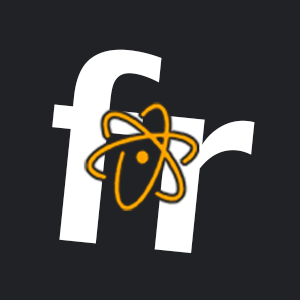
<style>
.page{position:relative;width:300px;height:300px;background:#202225}
.page>*{position:absolute;margin:0}
.t1{font:249.9px "LucidaSans-Demi";letter-spacing:-0.02em;color:#ffffff}
</style>
<div class="page">
<p class="t1" style="left:52px;top:49px;width:203px;height:204px;rotate:6deg">fr</p>
</div>
